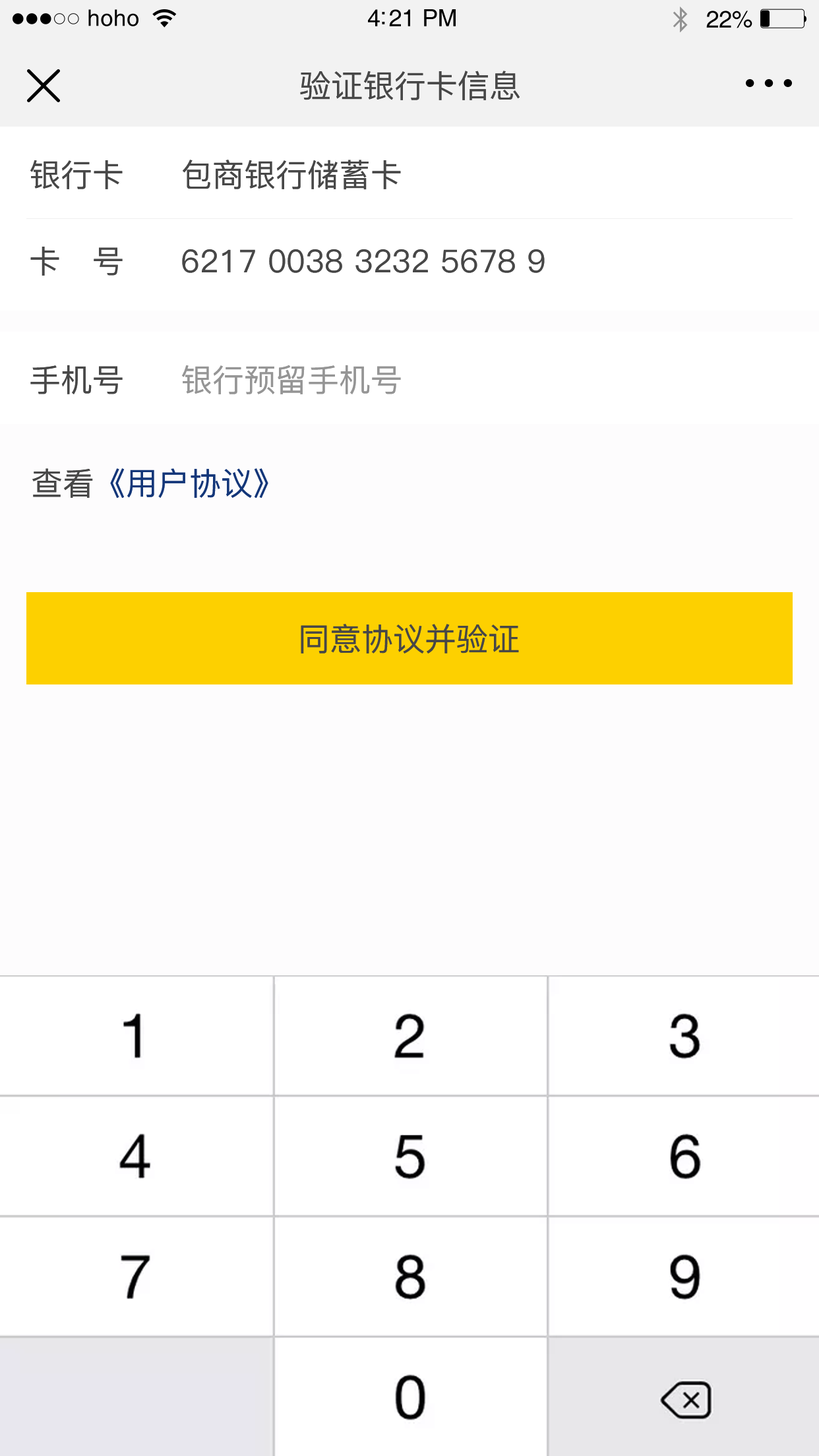
<style>
.page{position:relative;width:819px;height:1456px;background:#ffffff}
.page>*{position:absolute;margin:0}
.t1{font:22.8px "Helvetica";letter-spacing:0.02em;color:#000000}
.t2{font:23.8px "Helvetica";letter-spacing:-0.02em;color:#000000}
.t3{font:31.7px "PingFang-SC-Medium";color:#474747}
.t4{font:31.7px "PingFang-SC-Medium";color:#959595}
.t5{font:31.7px "PingFang-SC-Medium";color:#133679}
</style>
<div class="page">
<p class="t1" style="left:88px;top:9px;width:50px;height:17px">hoho</p>
<p class="t2" style="left:368px;top:9px;width:88px;height:17px">4:21 PM</p>
<p class="t2" style="left:706px;top:11px;width:46px;height:17px">22%</p>
<p class="t3" style="left:300px;top:71px;width:220px;height:29px">验证银行卡信息</p>
<p class="t3" style="left:30px;top:160px;width:93px;height:29px">银行卡</p>
<p class="t3" style="left:183px;top:160px;width:218px;height:30px">包商银行储蓄卡</p>
<p class="t3" style="left:30px;top:247px;width:93px;height:29px">卡   号</p>
<p class="t3" style="left:182px;top:249px;width:363px;height:24px">6217 0038 3232 5678 9</p>
<p class="t3" style="left:30px;top:365px;width:93px;height:29px">手机号</p>
<p class="t4" style="left:182px;top:365px;width:219px;height:29px">银行预留手机号</p>
<p class="t5" style="left:32px;top:468px;width:236px;height:31px"><span class="t3">查看</span>《用户协议》</p>
<p class="t3" style="left:301px;top:624px;width:218px;height:29px">同意协议并验证</p>
</div>
